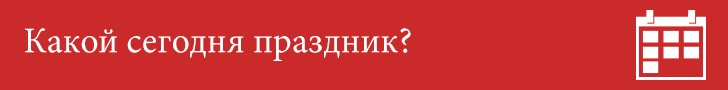
<style>
.page{position:relative;width:728px;height:90px;background:#ca2a2a}
.page>*{position:absolute;margin:0}
.t1{font:36px "MinionPro-Regular";color:#ffffff}
</style>
<div class="page">
<p class="t1" style="left:25px;top:28px;width:386px;height:33px">Какой сегодня праздник?</p>
</div>
